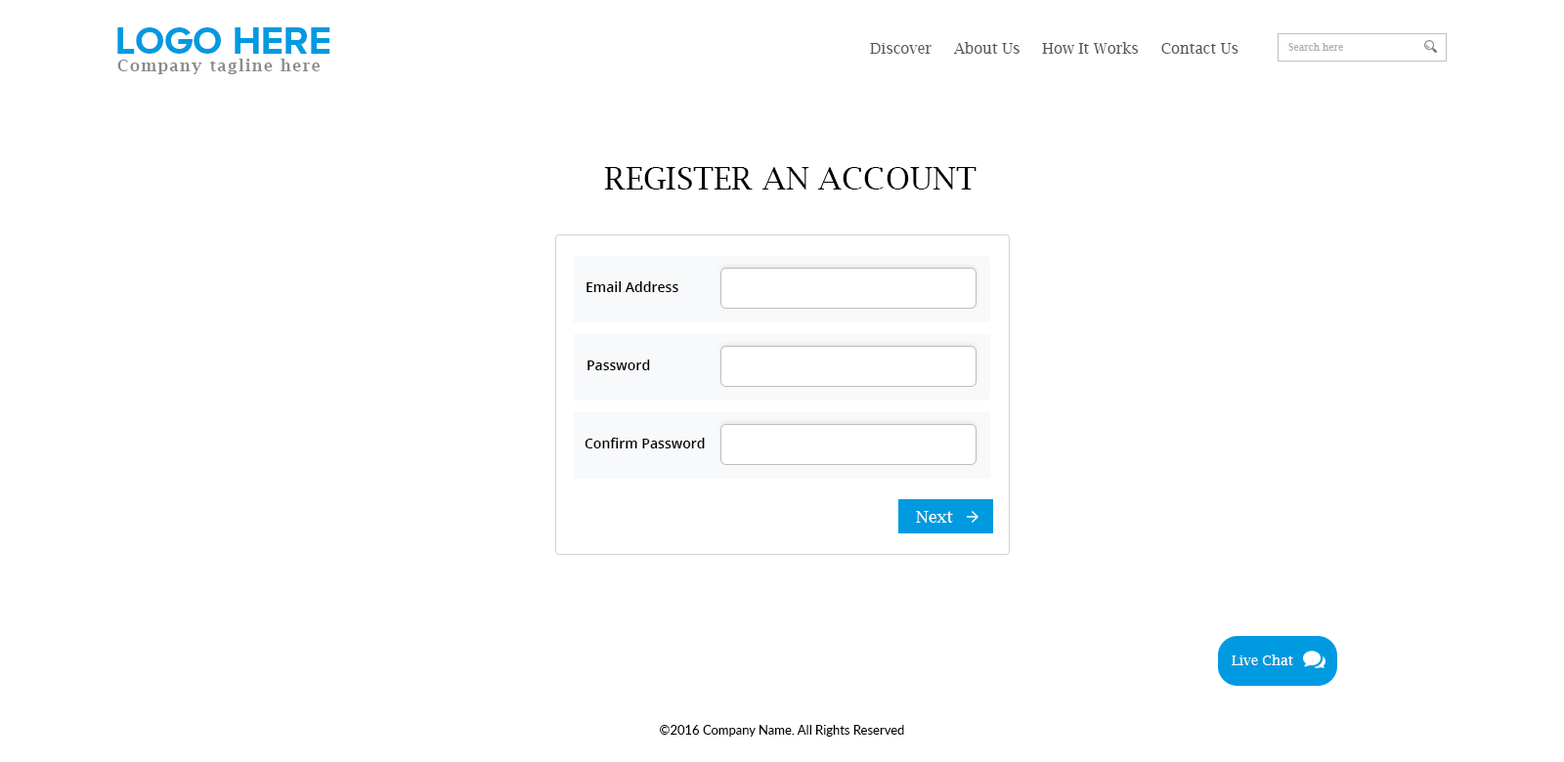
<style>
.page{position:relative;width:1564px;height:762px;background:#ffffff}
.page>*{position:absolute;margin:0}
.t1{font:39.1px "ProximaNovaA-Bold";color:#009ae1;text-transform:uppercase}
.t2{font:14.7px "LucidaBright";color:#585858}
.t3{font:9.8px "LucidaBright";color:#afafaf}
.t4{font:15.6px "LucidaBright-Demi";letter-spacing:0.1em;color:#898989}
.t5{font:31.3px "LucidaBright";color:#000000;text-transform:uppercase}
.t6{font:13.7px "OpenSans-Semibold";color:#000000}
.t7{font:16.6px "LucidaBright";color:#ffffff}
.t8{font:13.7px "LucidaBright";color:#ffffff}
.t9{font:12.7px "Lato-Regular";color:#000000}
</style>
<div class="page">
<p class="t1" style="left:117px;top:27px;width:213px;height:27px">Logo HERE</p>
<p class="t2" style="left:870px;top:42px;width:368px;height:12px">Discover     About Us     How It Works     Contact Us</p>
<p class="t3" style="left:1288px;top:43px;width:55px;height:8px">Search here</p>
<p class="t4" style="left:117px;top:59px;width:203px;height:15px">Company tagline here</p>
<p class="t5" style="left:604px;top:167px;width:373px;height:23px">Register an account</p>
<p class="t6" style="left:586px;top:282px;width:92px;height:10px">Email Address</p>
<p class="t6" style="left:587px;top:360px;width:63px;height:10px">Password</p>
<p class="t6" style="left:585px;top:438px;width:120px;height:11px">Confirm Password</p>
<p class="t7" style="left:916px;top:511px;width:37px;height:12px">Next</p>
<p class="t8" style="left:1232px;top:655px;width:61px;height:11px">Live Chat</p>
<p class="t9" style="left:660px;top:725px;width:244px;height:12px">©2016 Company Name. All Rights Reserved</p>
</div>
